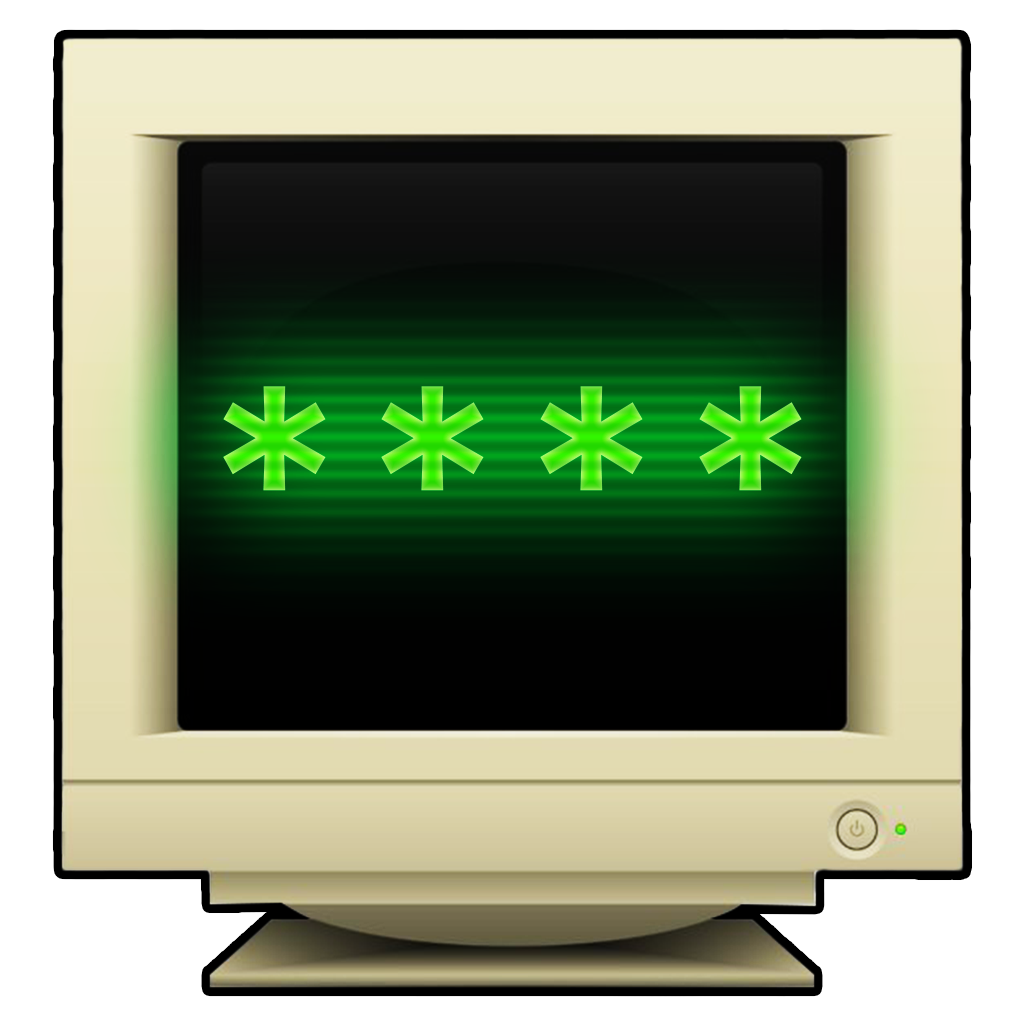
<style>
.page{position:relative;width:1024px;height:1024px}
.page>*{position:absolute;margin:0}
.t1{font:303.3px "SFProDisplay-Medium";letter-spacing:0.1em}
</style>
<div class="page">
<p class="t1" style="left:223px;top:386px;width:579px;height:105px">****</p>
</div>
